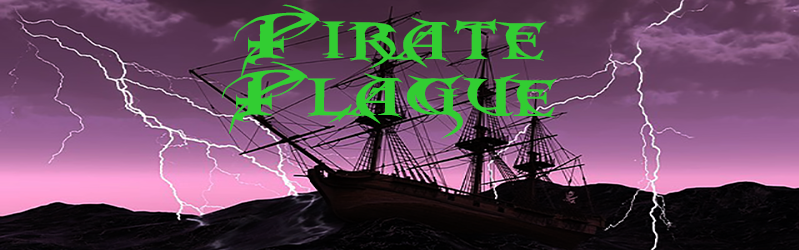
<style>
.page{position:relative;width:799px;height:250px}
.page>*{position:absolute;margin:0}
.t1{font:47.3px "MetalMacabre";color:#32cd32;scale:1.62 1}
</style>
<div class="page">
<p class="t1" style="left:221px;top:4px;width:337px;height:135px;text-align:center">Pirate <br>Plague</p>
</div>
